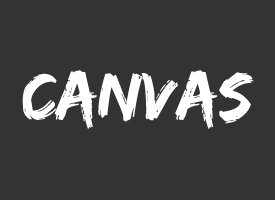
<style>
.page{position:relative;width:275px;height:200px;background:#333333}
.page>*{position:absolute;margin:0}
.t1{font:70px "EdoSZ";color:#ffffff}
</style>
<div class="page">
<p class="t1" style="left:22px;top:70px;width:232px;height:59px">canvas</p>
</div>
